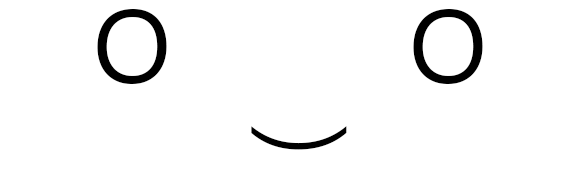
<style>
.page{position:relative;width:581px;height:170px;background:#ffffff}
.page>*{position:absolute;margin:0}
.t1{font:142.8px "NirmalaUI-Semilight";color:#000000}
.t2{font:110.4px "NirmalaUI-Semilight";color:#000000}
</style>
<div class="page">
<p class="t1" style="left:97px;top:9px;width:386px;height:75px">o      o</p>
<p class="t2" style="left:251px;top:126px;width:96px;height:24px;rotate:90deg">)</p>
</div>
